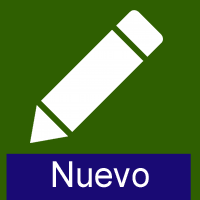
<style>
.page{position:relative;width:200px;height:200px;background:#2f5f01}
.page>*{position:absolute;margin:0}
.t1{font:36px "ArialMT";color:#ffffff;scale:0.96 1}
</style>
<div class="page">
<p class="t1" style="left:52px;top:161px;width:97px;height:27px">Nuevo</p>
</div>
